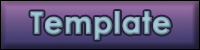
<style>
.page{position:relative;width:200px;height:50px}
.page>*{position:absolute;margin:0}
.t1{font:30px "CenturyGothic-Bold";color:#a3c7d6;font-weight:bold}
</style>
<div class="page">
<p class="t1" style="left:30px;top:11px;width:141px;height:29px">Template</p>
</div>
